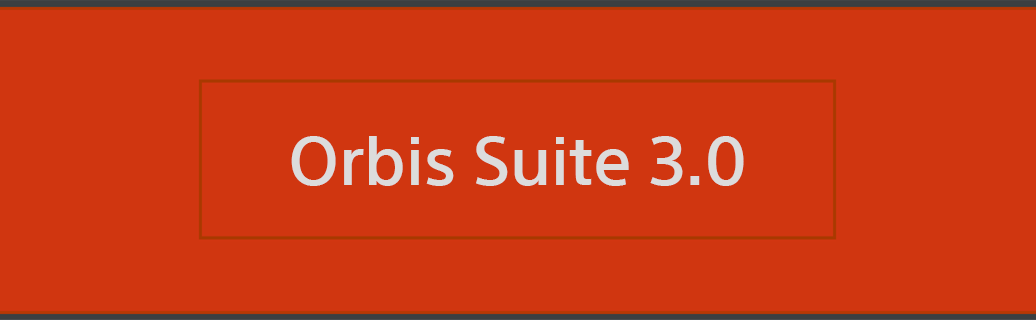
<style>
.page{position:relative;width:1036px;height:320px;background:#d03610}
.page>*{position:absolute;margin:0}
.t1{font:66.7px "SST-Medium";color:#dcdcdc}
</style>
<div class="page">
<p class="t1" style="left:291px;top:136px;width:453px;height:50px">Orbis Suite 3.0</p>
</div>
